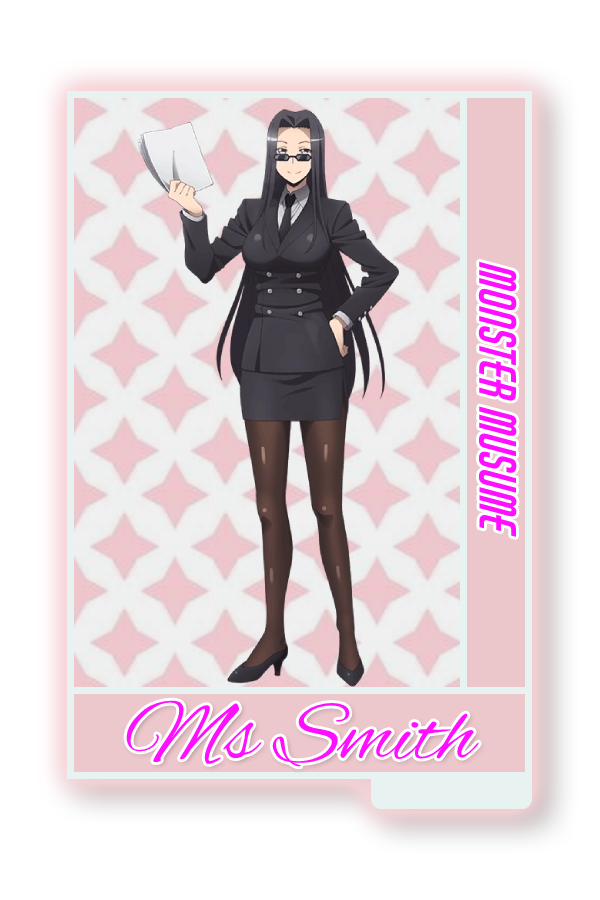
<style>
.page{position:relative;width:600px;height:900px;background:#ffffff}
.page>*{position:absolute;margin:0}
.t1{font:48.8px "AirAmerica-Regular";color:#ff0fff}
.t2{font:88px "AlexBrush-Regular";color:#ff0fff}
</style>
<div class="page">
<p class="t1" style="left:478px;top:261px;width:39px;height:276px;rotate:90deg">Monster Musume</p>
<p class="t2" style="left:126px;top:700px;width:353px;height:67px">Ms Smith</p>
</div>
